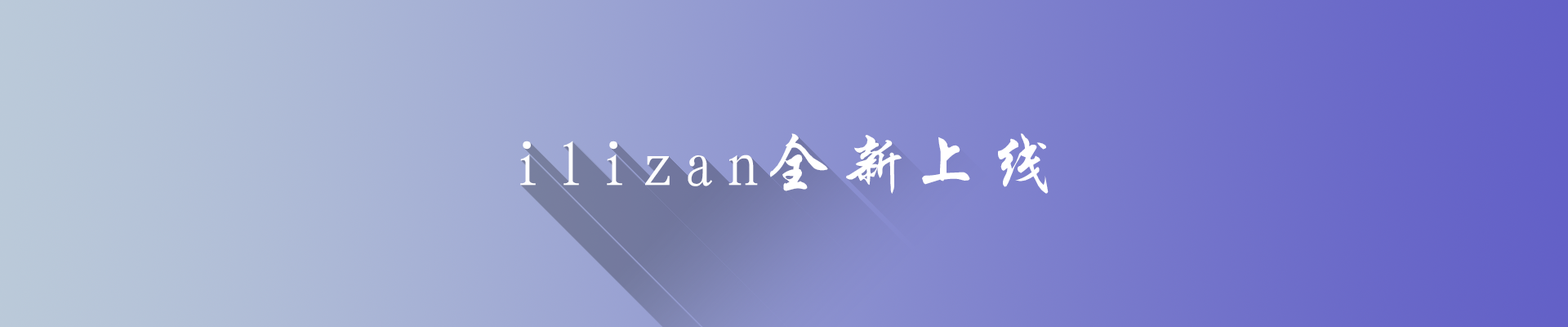
<style>
.page{position:relative;width:1568px;height:327px}
.page>*{position:absolute;margin:0}
.t1{font:65.3px "RS_XingKai";letter-spacing:0.16em;color:#ffffff}
</style>
<div class="page">
<p class="t1" style="left:520px;top:133px;width:529px;height:61px">ilizan全新上线</p>
</div>
